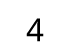
<style>
.page{position:relative;width:70px;height:55px;background:#ffffff}
.page>*{position:absolute;margin:0}
.t1{font:31.8px "DroidSans";color:#000000}
</style>
<div class="page">
<p class="t1" style="left:26px;top:18px;width:18px;height:24px">4</p>
</div>
